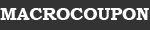
<style>
.page{position:relative;width:150px;height:30px;background:#333333}
.page>*{position:absolute;margin:0}
.t1{font:17.5px "BookmanOldStyle-Bold";color:#ffffff}
</style>
<div class="page">
<p class="t1" style="left:0px;top:8px;width:149px;height:12px">MACROCOUPON</p>
</div>
